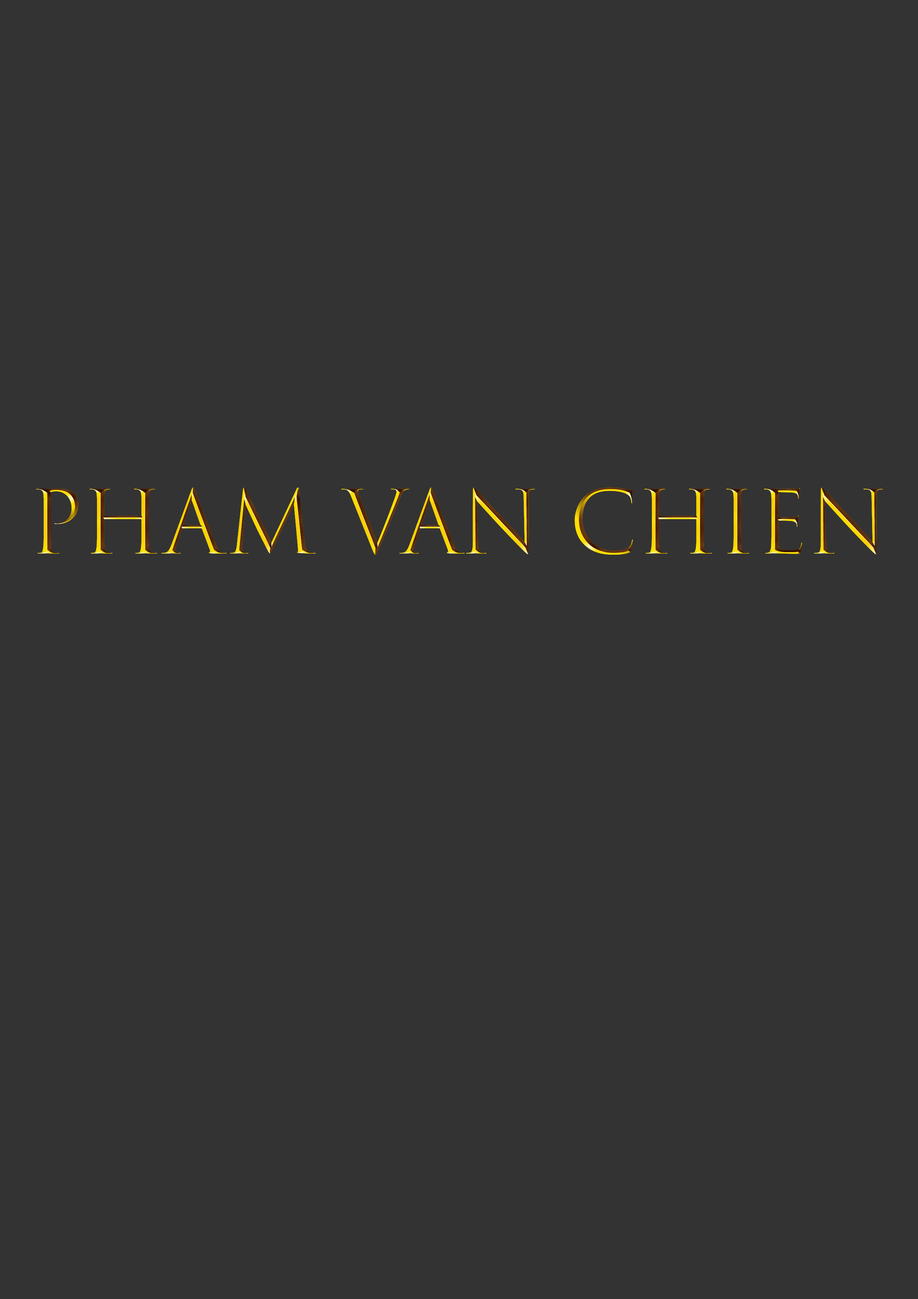
<style>
.page{position:relative;width:918px;height:1299px;background:#333333}
.page>*{position:absolute;margin:0}
.t1{font:85.6px "TrajanColor-Concept"}
</style>
<div class="page">
<p class="t1" style="left:36px;top:487px;width:847px;height:68px">PHAM VAN CHIEN</p>
</div>
